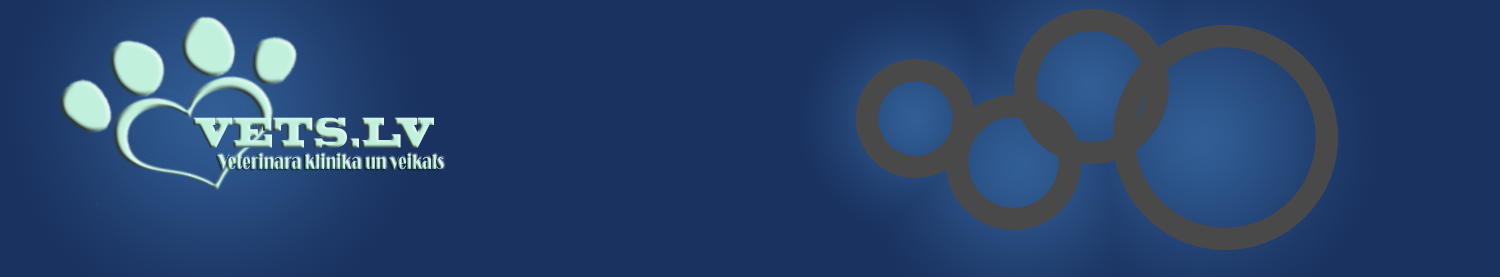
<style>
.page{position:relative;width:1500px;height:277px;background:#1a3260}
.page>*{position:absolute;margin:0}
.t1{font:39.5px "BlackoakStd";scale:0.56 1}
.t2{font:21.6px "Broadway";scale:0.66 1}
</style>
<div class="page">
<p class="t1" style="left:193px;top:117px;width:241px;height:31px">VETS.LV</p>
<p class="t2" style="left:217px;top:153px;width:227px;height:17px">Veterinara klinika un veikals</p>
</div>
